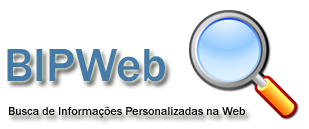
<style>
.page{position:relative;width:309px;height:129px;background:#ffffff}
.page>*{position:absolute;margin:0}
.t1{font:48px "FranklinGothic-Medium";color:#467aa7}
.t2{font:12px "FranklinGothic-Medium";color:#000000}
</style>
<div class="page">
<p class="t1" style="left:7px;top:49px;width:158px;height:33px">BIPWeb</p>
<p class="t2" style="left:9px;top:106px;width:236px;height:12px">Busca de Informações Personalizadas na Web</p>
</div>
